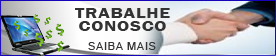
<style>
.page{position:relative;width:276px;height:56px}
.page>*{position:absolute;margin:0}
.t1{font:14.6px/12.5px "FranklinGothic-Demi";letter-spacing:0.05em;color:#333333;scale:1.28 1}
.t2{font:11.2px "ArialMT";letter-spacing:0.05em;color:#333333}
</style>
<div class="page">
<p class="t1" style="left:75px;top:8px;width:95px;height:23px;text-align:center">TRABALHE<br>CONOSCO</p>
<p class="t2" style="left:88px;top:42px;width:68px;height:8px">SAIBA MAIS</p>
</div>
